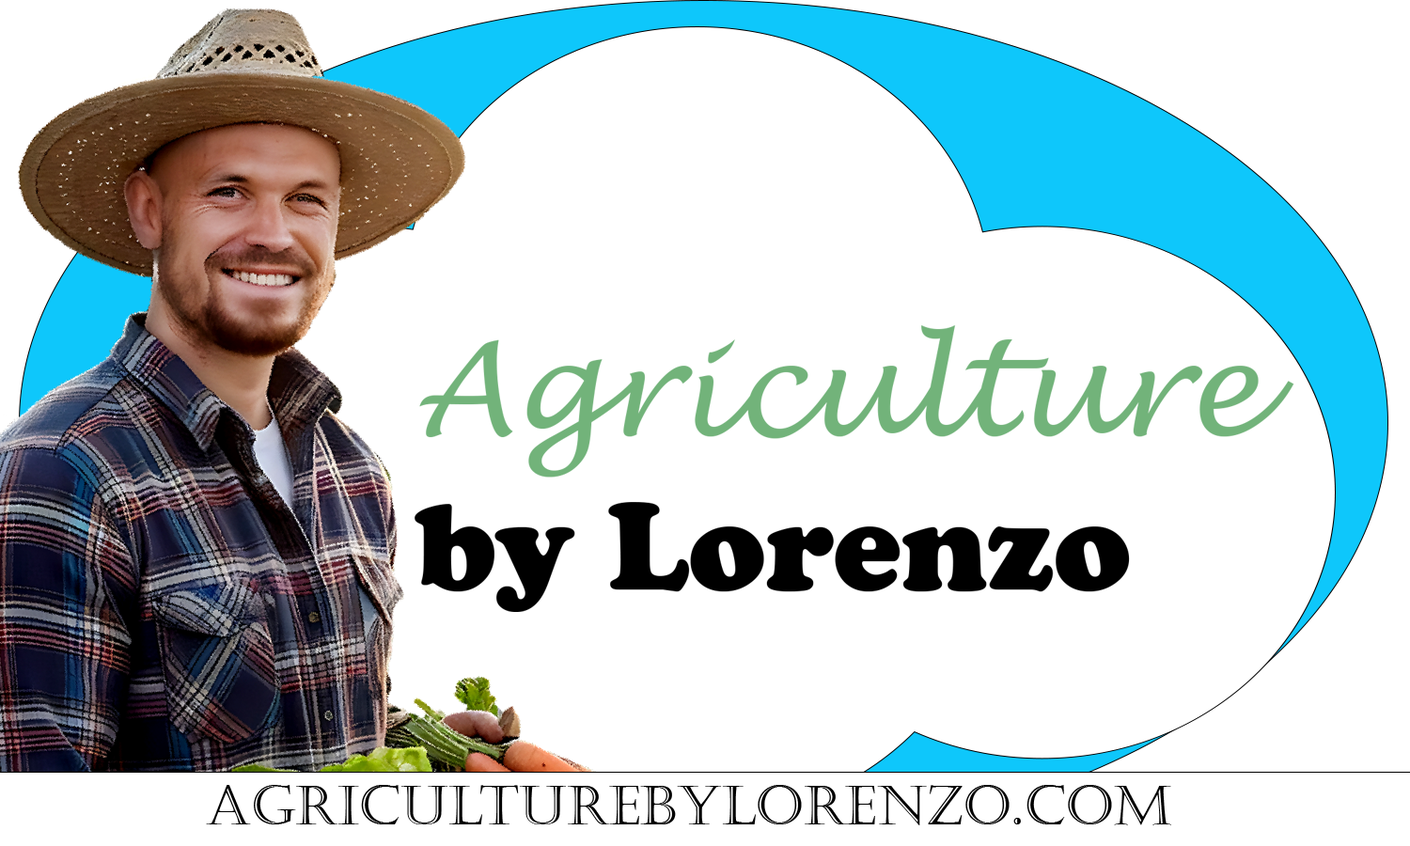
<style>
.page{position:relative;width:1410px;height:846px;background:#ffffff}
.page>*{position:absolute;margin:0}
.t1{font:128.6px "LucidaHandwriting-Italic";color:#72b37a}
.t2{font:128.6px "CooperBlack";color:#000000}
.t3{font:54.8px "Castellar";color:#000000}
</style>
<div class="page">
<p class="t1" style="left:414px;top:325px;width:880px;height:287px">Agriculture <br><span class="t2">by Lorenzo</span></p>
<p class="t3" style="left:206px;top:785px;width:965px;height:40px">AgriculturebyLorenzo.com</p>
</div>
